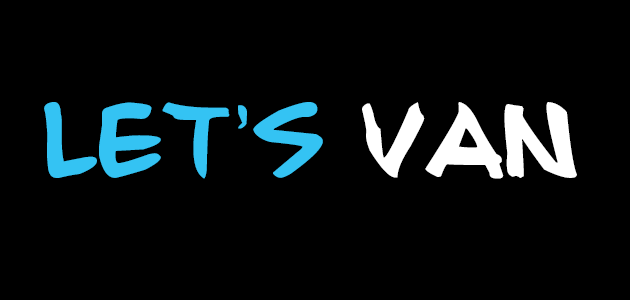
<style>
.page{position:relative;width:630px;height:300px;background:#000000}
.page>*{position:absolute;margin:0}
.t1{font:83.3px "Smilecomix";letter-spacing:-0.025em;color:#34c3f3;text-transform:uppercase}
.t2{font:83.3px "Smilecomix";letter-spacing:-0.025em;color:#ffffff;text-transform:uppercase}
</style>
<div class="page">
<p class="t1" style="left:44px;top:102px;width:533px;height:77px">Let’s <span class="t2">VAN</span></p>
</div>
